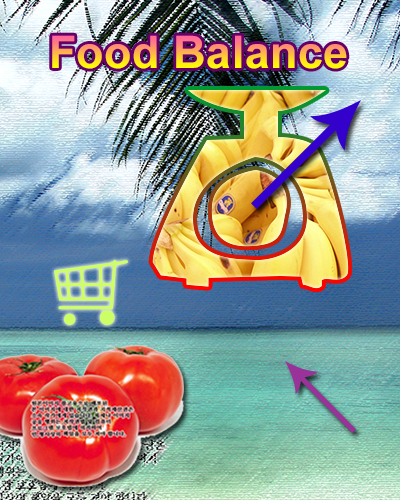
<style>
.page{position:relative;width:400px;height:500px}
.page>*{position:absolute;margin:0}
.t1{font:45px "Arial-BoldMT";letter-spacing:0.01em}
</style>
<div class="page">
<p class="t1" style="left:52px;top:35px;width:295px;height:34px">Food Balance</p>
</div>
